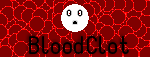
<style>
.page{position:relative;width:150px;height:57px;background:#800000}
.page>*{position:absolute;margin:0}
.t1{font:25px "Static";color:#000000}
</style>
<div class="page">
<p class="t1" style="left:29px;top:36px;width:100px;height:19px">BloodClot</p>
</div>
